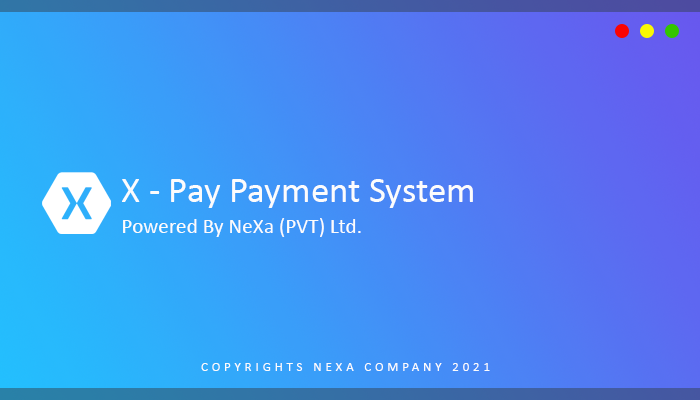
<style>
.page{position:relative;width:700px;height:400px}
.page>*{position:absolute;margin:0}
.t1{font:37px "Calibri";color:#fcfcfc}
.t2{font:21.3px "Calibri";color:#fcfcfc}
.t3{font:12.6px "Calibri";letter-spacing:0.32em;color:#fcfcfc}
</style>
<div class="page">
<p class="t1" style="left:122px;top:179px;width:351px;height:29px">X - Pay Payment System</p>
<p class="t2" style="left:123px;top:218px;width:238px;height:19px">Powered By NeXa (PVT) Ltd.</p>
<p class="t3" style="left:201px;top:363px;width:289px;height:8px">COPYRIGHTS NEXA COMPANY 2021</p>
</div>
